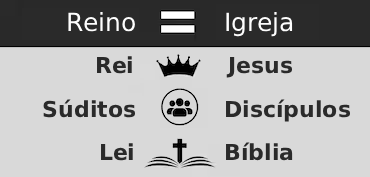
<style>
.page{position:relative;width:370px;height:177px;background:#d9d9d9}
.page>*{position:absolute;margin:0}
.t1{font:25px "DejaVuSans";color:#fefefe}
.t2{font:22px "DejaVuSans-Bold";color:#2a2a2a}
</style>
<div class="page">
<p class="t1" style="left:68px;top:12px;width:67px;height:20px">Reino</p>
<p class="t1" style="left:226px;top:12px;width:67px;height:25px">Igreja</p>
<p class="t2" style="left:97px;top:56px;width:35px;height:18px">Rei</p>
<p class="t2" style="left:226px;top:56px;width:67px;height:22px">Jesus</p>
<p class="t2" style="left:43px;top:99px;width:93px;height:19px">Súditos</p>
<p class="t2" style="left:226px;top:99px;width:125px;height:23px">Discípulos</p>
<p class="t2" style="left:101px;top:143px;width:32px;height:18px">Lei</p>
<p class="t2" style="left:226px;top:142px;width:67px;height:19px">Bíblia</p>
</div>
